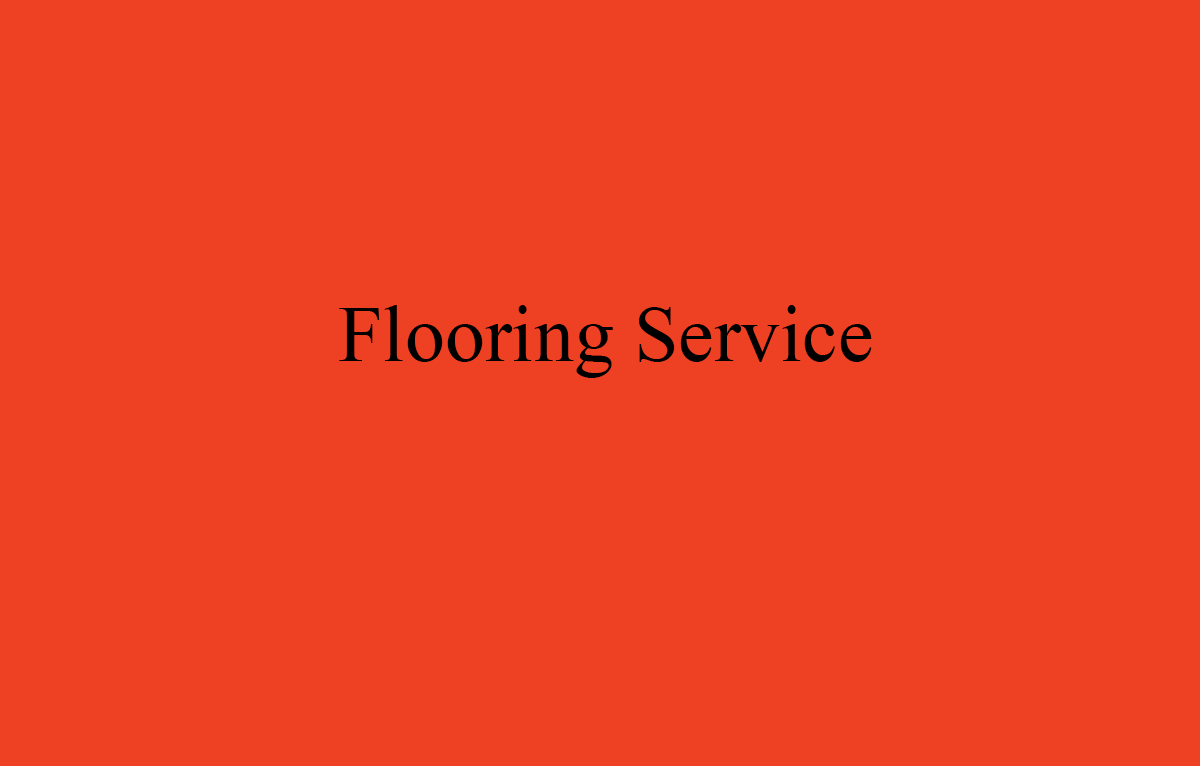
<style>
.page{position:relative;width:1200px;height:766px;background:#ee4023}
.page>*{position:absolute;margin:0}
.t1{font:80px "TimesNewRomanPSMT";color:#000000}
</style>
<div class="page">
<p class="t1" style="left:339px;top:305px;width:533px;height:73px">Flooring Service</p>
</div>
